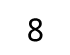
<style>
.page{position:relative;width:70px;height:55px;background:#ffffff}
.page>*{position:absolute;margin:0}
.t1{font:31.8px "DroidSans";color:#000000}
</style>
<div class="page">
<p class="t1" style="left:28px;top:18px;width:15px;height:24px">8</p>
</div>
